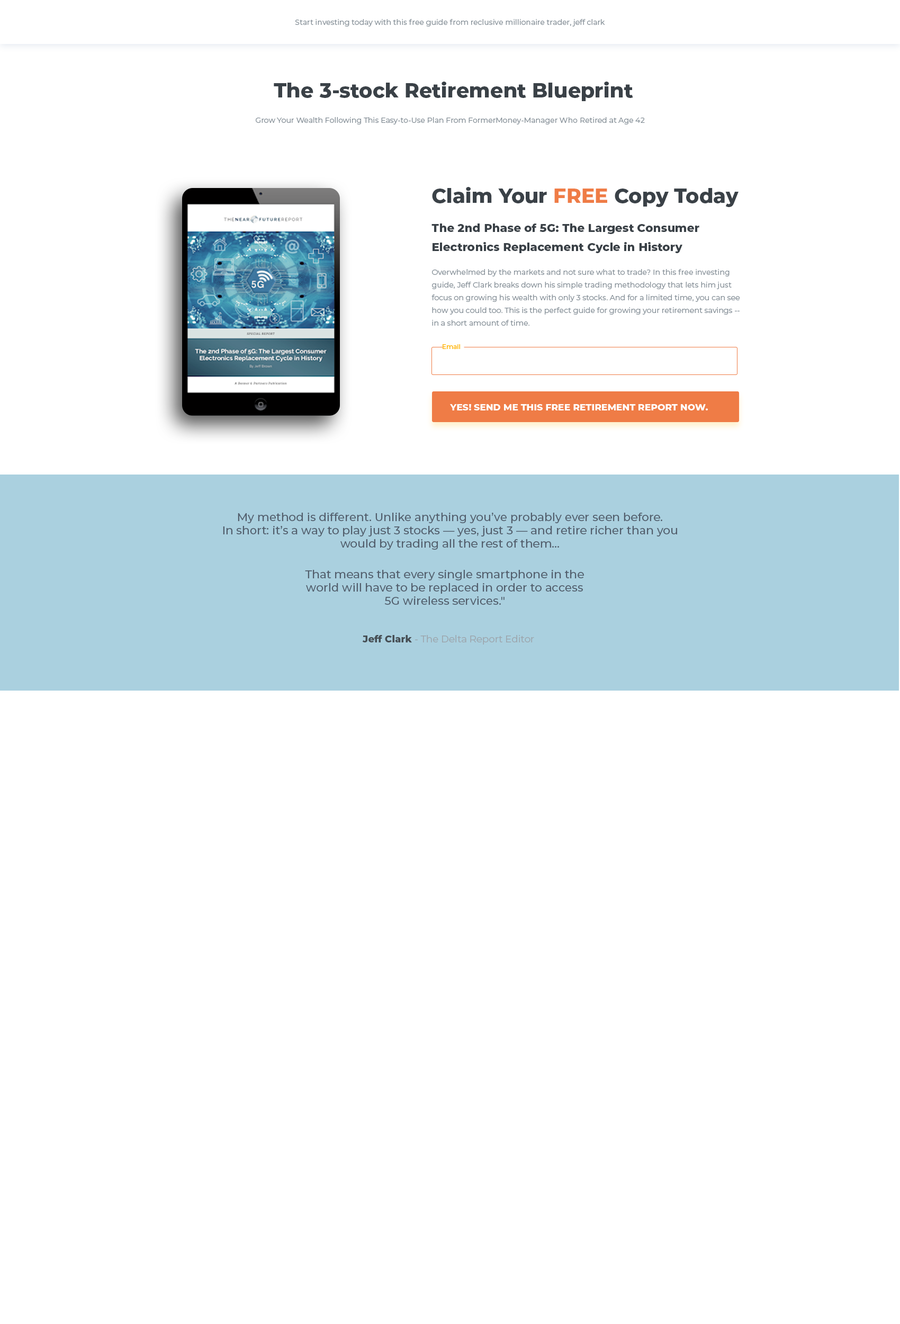
<style>
.page{position:relative;width:900px;height:1324px;background:#ffffff}
.page>*{position:absolute;margin:0}
.t1{font:7.4px "Montserrat-Regular";color:#858f97}
.t2{font:19.9px "Montserrat-ExtraBold";color:#3a4147}
.t3{font:19.9px "Montserrat-ExtraBold";color:#ef7c46}
.t4{font:11.3px/19.1px "Montserrat-ExtraBold";color:#3a4147}
.t5{font:7.5px/12.7px "Montserrat-Regular";color:#858f97}
.t6{font:6.4px "Montserrat-Medium";color:#ffb200}
.t7{font:9px "Montserrat-ExtraBold";color:#ffffff;text-transform:uppercase}
.t8{font:11.3px/13.2px "Montserrat-Medium";color:#525e6c}
.t9{font:9.5px "Montserrat-Regular";color:#9ca5ac}
.t10{font:9.5px "Montserrat-ExtraBold";color:#464e54}
</style>
<div class="page">
<p class="t1" style="left:295px;top:19px;width:310px;height:7px">Start investing today with this free guide from reclusive millionaire trader, jeff clark</p>
<p class="t2" style="left:274px;top:82px;width:360px;height:19px">The 3-stock Retirement Blueprint</p>
<p class="t1" style="left:256px;top:117px;width:389px;height:7px">Grow Your Wealth Following This Easy-to-Use Plan From FormerMoney-Manager Who Retired at Age 42</p>
<p class="t2" style="left:432px;top:187px;width:307px;height:20px">Claim Your <span class="t3">FREE </span>Copy Today</p>
<p class="t4" style="left:432px;top:224px;width:268px;height:29px">The 2nd Phase of 5G: The Largest Consumer <br>Electronics Replacement Cycle in History</p>
<p class="t5" style="left:432px;top:269px;width:309px;height:57px">Overwhelmed by the markets and not sure what to trade? In this free investing guide, Jeff Clark breaks down his simple trading methodology that lets him just focus on growing his wealth with only 3 stocks. And for a limited time, you can see how you could too. This is the perfect guide for growing your retirement savings -- in a short amount of time.</p>
<p class="t6" style="left:443px;top:344px;width:17px;height:5px">Email</p>
<p class="t7" style="left:450px;top:404px;width:258px;height:7px">YES! Send Me This FREE Retirement Report Now.</p>
<p class="t8" style="left:223px;top:513px;width:454px;height:37px;text-align:center">My method is different. Unlike anything you’ve probably ever seen before. <br>In short: it’s a way to play just 3 stocks — yes, just 3 — and retire richer than you would by trading all the rest of them…</p>
<p class="t8" style="left:305px;top:570px;width:279px;height:35px;text-align:center">That means that every single smartphone in the<br>world will have to be replaced in order to access<br>5G wireless services."</p>
<p class="t9" style="left:362px;top:635px;width:172px;height:10px"><span class="t10">Jeff Clark </span>- The Delta Report Editor</p>
</div>
